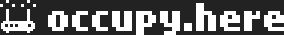
<style>
.page{position:relative;width:284px;height:35px;background:#222222}
.page>*{position:absolute;margin:0}
.t1{font:24px/36px "NokiaCellphoneFC-Small";color:#ffffff}
.t2{font:32px/36px "NokiaCellphoneFC-Small";color:#ffffff}
</style>
<div class="page">
<p class="t1" style="left:48px;top:3px;width:236px;height:32px"><span class="t2">occupy.here<br></span>forum<br>media archive<br>about</p>
</div>
